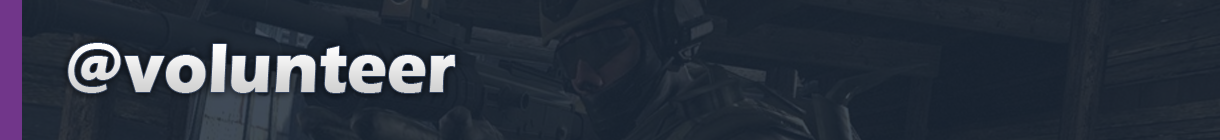
<style>
.page{position:relative;width:1220px;height:140px}
.page>*{position:absolute;margin:0}
.t1{font:72.3px "ErasITC-Bold";color:#e4e4e4;scale:0.93 1}
</style>
<div class="page">
<p class="t1" style="left:68px;top:43px;width:387px;height:50px">@volunteer</p>
</div>
